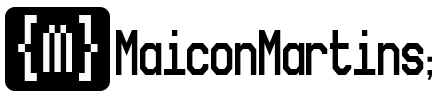
<style>
.page{position:relative;width:440px;height:98px;background:#ffffff}
.page>*{position:absolute;margin:0}
.t1{font:95.2px "PixelTwist";color:#fcfcfc;scale:0.71 1}
.t2{font:102.9px "NovaMono";color:#000000;scale:0.82 1}
.t3{font:40px "SquareFont";color:#000000;scale:0.82 1}
</style>
<div class="page">
<p class="t1" style="left:18px;top:15px;width:80px;height:66px">{m}</p>
<p class="t2" style="left:116px;top:30px;width:316px;height:50px">MaiconMartins<span class="t3">;</span></p>
</div>
